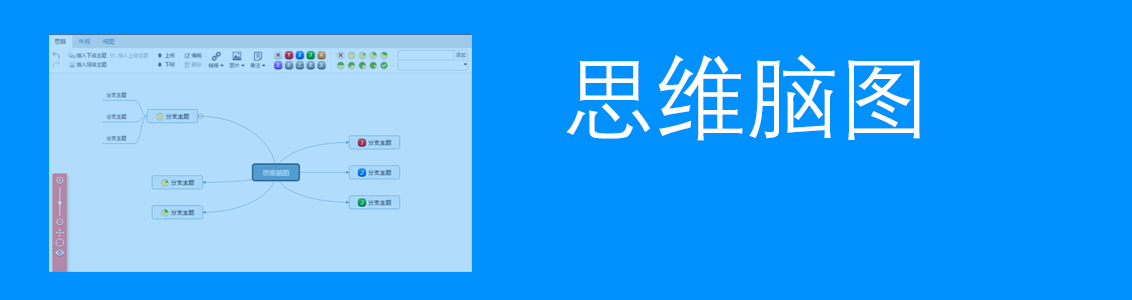
<style>
.page{position:relative;width:1132px;height:300px;background:#0091ff}
.page>*{position:absolute;margin:0}
.t1{font:92.5px "FZDX--GB1-4";color:#fefefe}
</style>
<div class="page">
<p class="t1" style="left:566px;top:54px;width:354px;height:87px">思维脑图</p>
</div>
